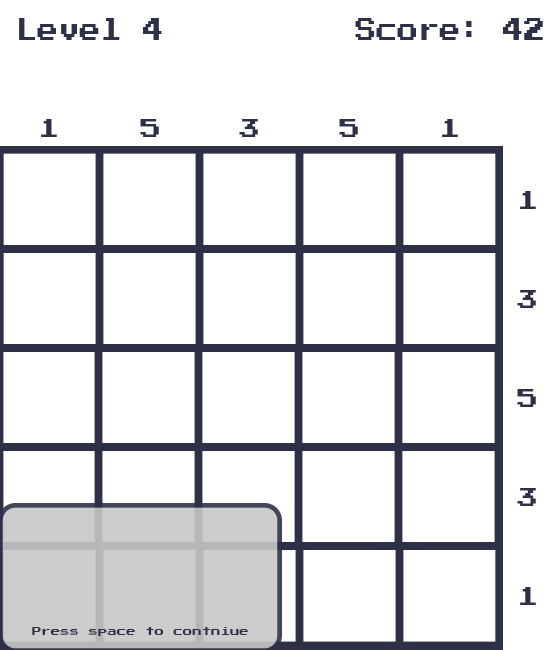
<style>
.page{position:relative;width:560px;height:650px;background:#ffffff}
.page>*{position:absolute;margin:0}
.t1{font:25.7px "PressStart2P-Regular";color:#2d3047;scale:0.82 1}
.t2{font:20.8px "PressStart2P-Regular";color:#2d3047}
.t3{font:9.4px "PressStart2P-Regular";color:#2d3047}
</style>
<div class="page">
<p class="t1" style="left:19px;top:18px;width:143px;height:22px">Level 4</p>
<p class="t1" style="left:355px;top:18px;width:188px;height:22px">Score: 42</p>
<p class="t2" style="left:41px;top:119px;width:16px;height:18px">1</p>
<p class="t2" style="left:140px;top:119px;width:19px;height:18px">5</p>
<p class="t2" style="left:239px;top:119px;width:19px;height:18px">3</p>
<p class="t2" style="left:339px;top:119px;width:19px;height:18px">5</p>
<p class="t2" style="left:442px;top:119px;width:16px;height:18px">1</p>
<p class="t2" style="left:520px;top:191px;width:16px;height:18px">1</p>
<p class="t2" style="left:517px;top:290px;width:19px;height:18px">3</p>
<p class="t2" style="left:517px;top:389px;width:19px;height:18px">5</p>
<p class="t2" style="left:517px;top:488px;width:19px;height:18px">3</p>
<p class="t2" style="left:520px;top:587px;width:16px;height:18px">1</p>
<p class="t3" style="left:32px;top:627px;width:216px;height:9px">Press space to contniue</p>
</div>
